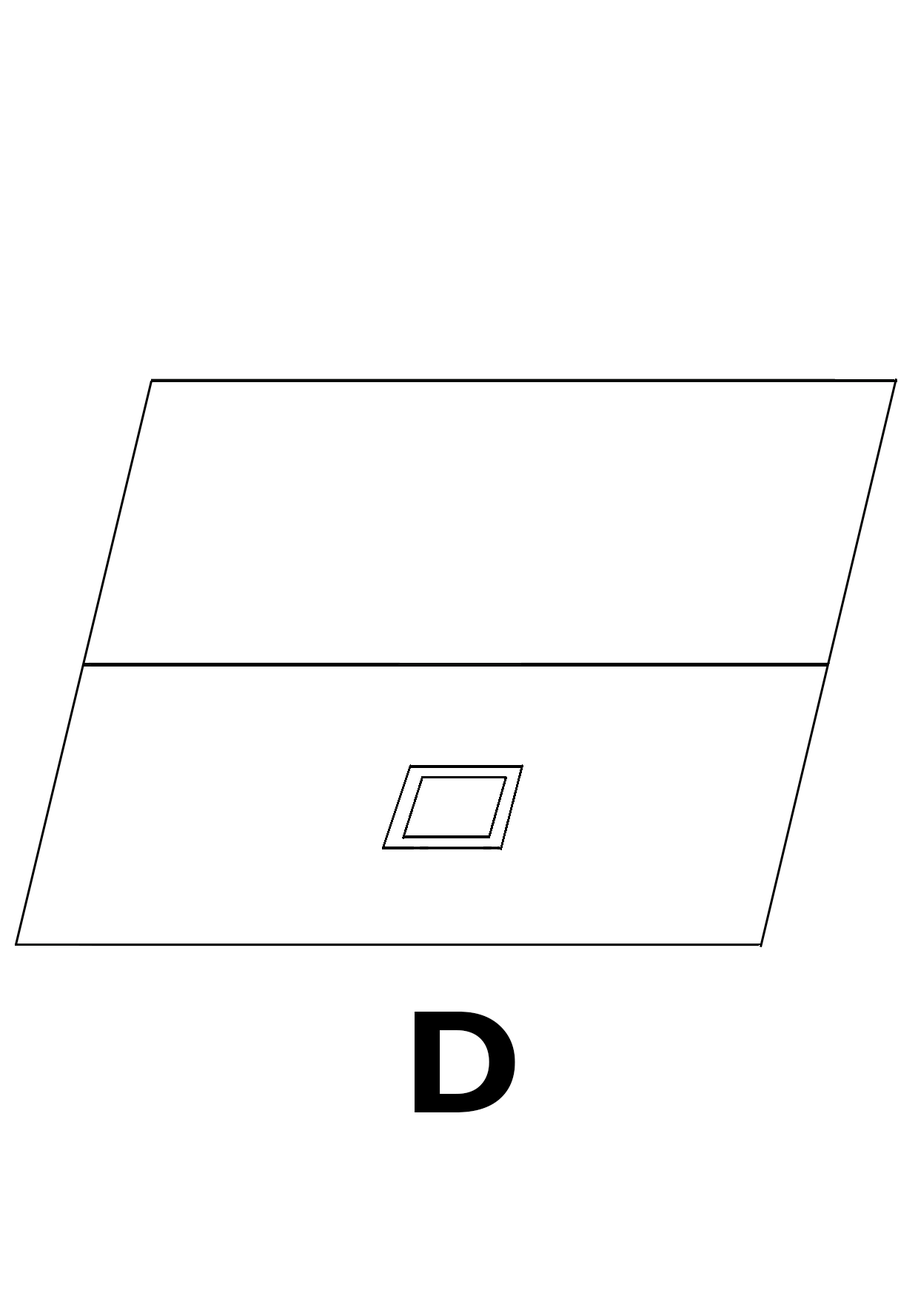
<style>
.page{position:relative;width:918px;height:1299px;background:#ffffff}
.page>*{position:absolute;margin:0}
.t1{font:148.1px "GillSansMT-Bold";color:#000000}
</style>
<div class="page">
<p class="t1" style="left:415px;top:1011px;width:100px;height:101px">D</p>
</div>
